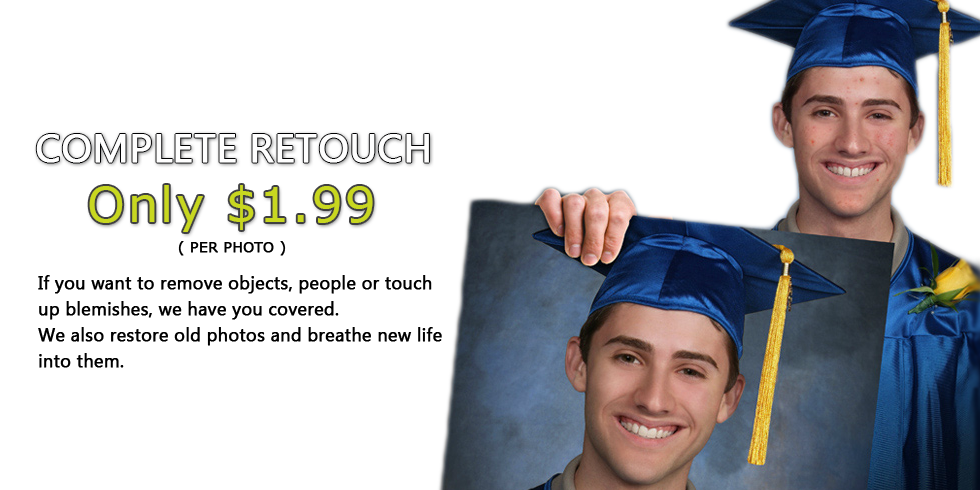
<style>
.page{position:relative;width:980px;height:490px;background:#ffffff}
.page>*{position:absolute;margin:0}
.t1{font:40px "LaoUI";color:#fefefe;font-weight:bold}
.t2{font:48px "Verdana";letter-spacing:0.05em;color:#c8d720}
.t3{font:14px "Verdana";color:#000000;font-weight:bold}
.t4{font:18px "LaoUI";color:#000000;font-weight:bold}
</style>
<div class="page">
<p class="t1" style="left:36px;top:134px;width:393px;height:29px">COMPLETE RETOUCH</p>
<p class="t2" style="left:89px;top:185px;width:284px;height:47px">Only $1.99</p>
<p class="t3" style="left:178px;top:241px;width:108px;height:15px">( PER PHOTO )</p>
<p class="t4" style="left:38px;top:275px;width:404px;height:93px">If you want to remove objects, people or touch <br>up blemishes, we have you covered.<br>We also restore old photos and breathe new life <br>into them.</p>
</div>
